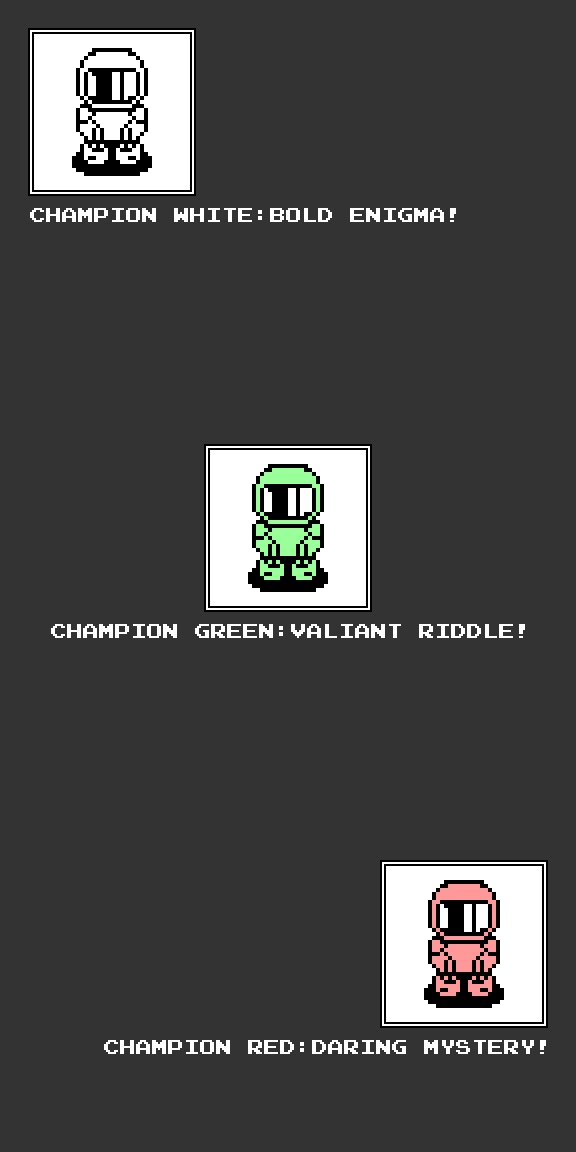
<style>
.page{position:relative;width:576px;height:1152px;background:#333333}
.page>*{position:absolute;margin:0}
.t1{font:16px "PressStart2P";color:#ffffff}
</style>
<div class="page">
<p class="t1" style="left:30px;top:208px;width:426px;height:14px">CHAMPION WHITE:BOLD ENIGMA!</p>
<p class="t1" style="left:51px;top:624px;width:474px;height:14px">CHAMPION GREEN:VALIANT RIDDLE!</p>
<p class="t1" style="left:104px;top:1040px;width:442px;height:14px">CHAMPION RED:DARING MYSTERY!</p>
</div>
